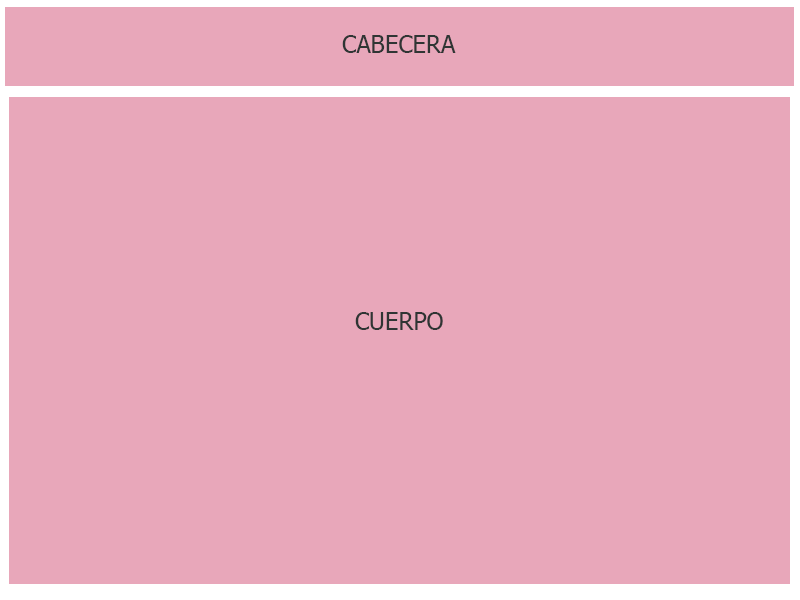
<style>
.page{position:relative;width:800px;height:600px;background:#e8a7ba}
.page>*{position:absolute;margin:0}
.t1{font:24px "Tahoma";color:#2f3534}
</style>
<div class="page">
<p class="t1" style="left:342px;top:35px;width:114px;height:18px">CABECERA</p>
<p class="t1" style="left:355px;top:312px;width:88px;height:18px">CUERPO</p>
</div>
